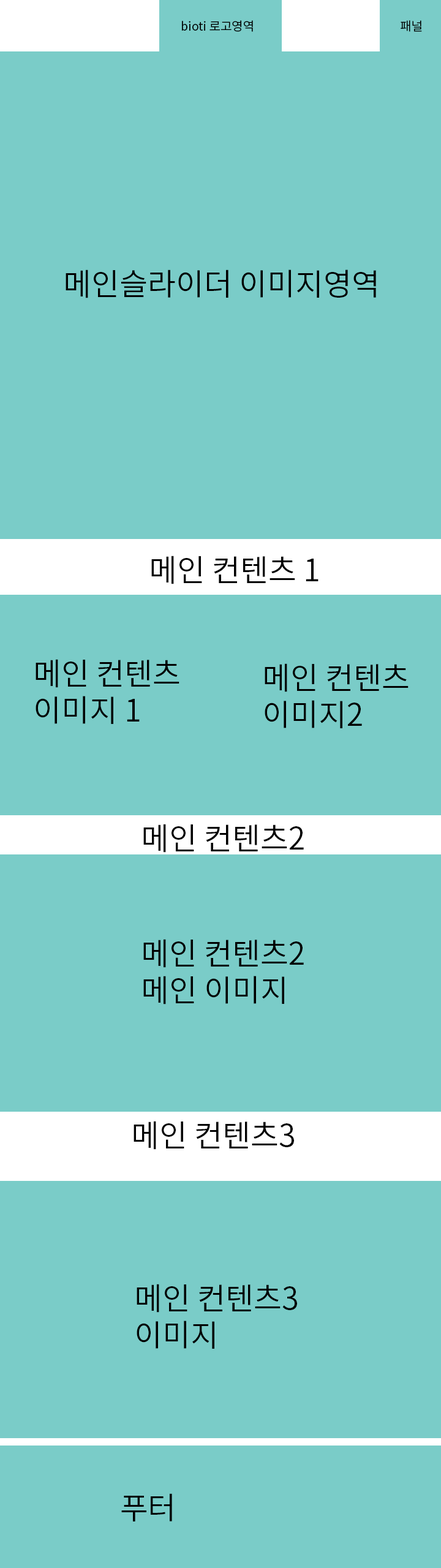
<style>
.page{position:relative;width:441px;height:1568px;background:#7accc8}
.page>*{position:absolute;margin:0}
.t1{font:12.2px "NotoSansCJKkr-DemiLight";color:#000000}
.t2{font:30.6px "NotoSansCJKkr-DemiLight";color:#000000}
</style>
<div class="page">
<p class="t1" style="left:182px;top:20px;width:71px;height:12px">bioti 로고영역</p>
<p class="t1" style="left:401px;top:20px;width:21px;height:12px">패널</p>
<p class="t2" style="left:66px;top:270px;width:310px;height:28px">메인슬라이더 이미지영역</p>
<p class="t2" style="left:151px;top:556px;width:167px;height:28px">메인 컨텐츠 1</p>
<p class="t2" style="left:36px;top:659px;width:143px;height:65px">메인 컨텐츠 이미지 1<br>이미지</p>
<p class="t2" style="left:265px;top:663px;width:144px;height:65px">메인 컨텐츠<br>이미지2</p>
<p class="t2" style="left:143px;top:824px;width:161px;height:29px">메인 컨텐츠2</p>
<p class="t2" style="left:143px;top:939px;width:161px;height:66px">메인 컨텐츠2<br>메인 이미지</p>
<p class="t2" style="left:134px;top:1121px;width:160px;height:29px">메인 컨텐츠3</p>
<p class="t2" style="left:137px;top:1284px;width:160px;height:65px">메인 컨텐츠3 이미지</p>
<p class="t2" style="left:121px;top:1493px;width:51px;height:28px">푸터</p>
</div>
